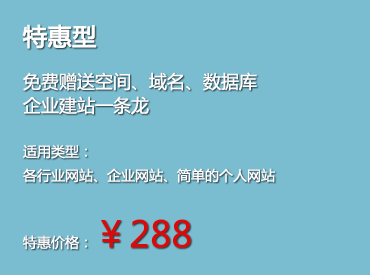
<style>
.page{position:relative;width:370px;height:275px;background:#7abdd0}
.page>*{position:absolute;margin:0}
.t1{font:14px/24px "MicrosoftYaHei"}
.t2{font:24px/24px "MicrosoftYaHei";font-weight:bold}
.t3{font:18px/24px "MicrosoftYaHei"}
.t4{font:36px/24px "MicrosoftYaHei"}
.t5{font:14px/24px "MicrosoftYaHei";color:#fffefe}
.t6{font:24px/24px "MicrosoftYaHei";color:#fffefe;font-weight:bold}
.t7{font:18px/24px "MicrosoftYaHei";color:#fffefe}
.t8{font:36px/24px "MicrosoftYaHei";color:#d90a0a}
</style>
<div class="page">
<p class="t1" style="left:22px;top:23px;width:281px;height:226px"><span class="t2">精仿型<br><br></span><span class="t3">精仿高端网站 美观、大气<br>让您的网站在同行业中脱颖而出<br><br></span>您只需提供您喜欢的网站地址以及公司资料<br>剩下的一切交给我们，保证精仿100%相似度。<br><br>特惠价格：<span class="t4">￥1088</span></p>
<p class="t5" style="left:22px;top:24px;width:253px;height:226px"><span class="t6">特惠型<br><br></span><span class="t7">免费赠送空间、域名、数据库<br>企业建站一条龙<br><br></span>适用类型：<br>各行业网站、企业网站、简单的个人网站<br><br>特惠价格：<span class="t8">￥288</span></p>
</div>
